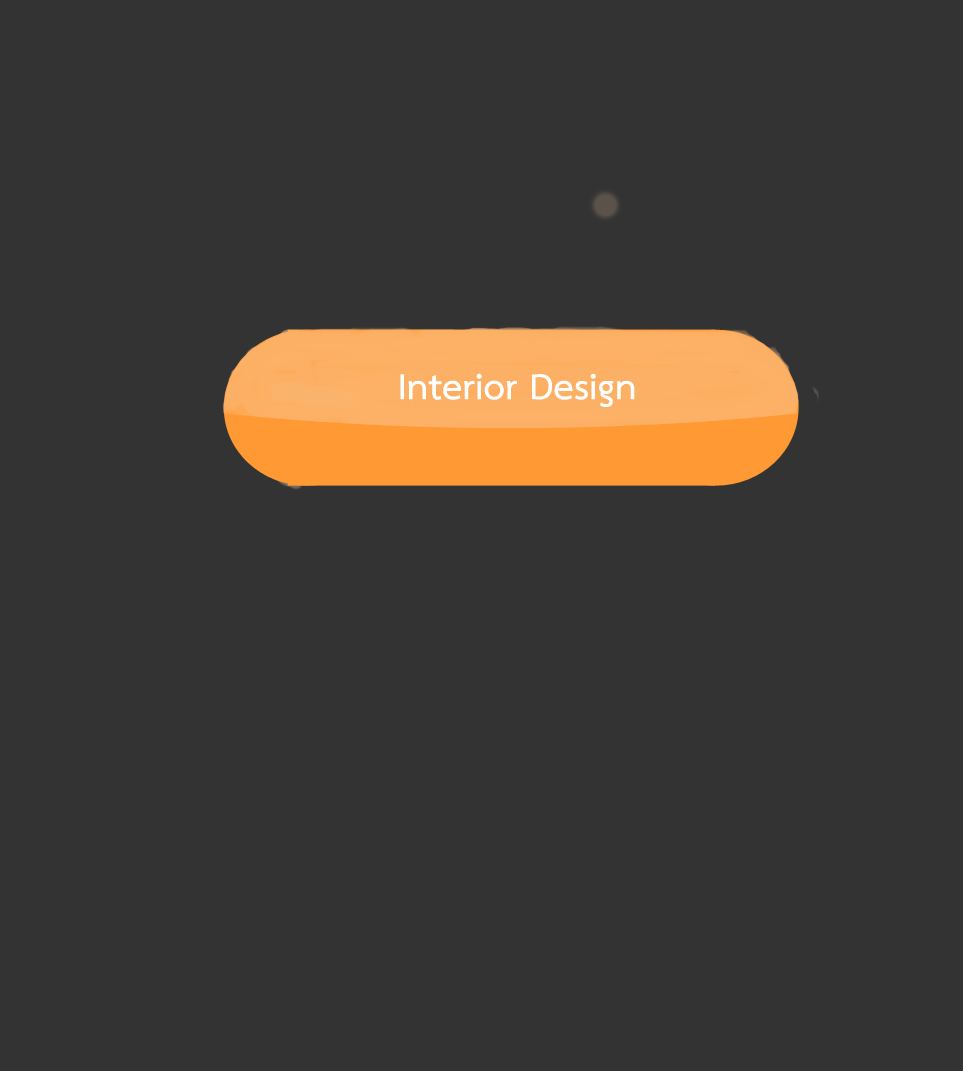
<style>
.page{position:relative;width:963px;height:1071px;background:#333333}
.page>*{position:absolute;margin:0}
.t1{font:52px "THSarabunPSK-Bold";color:#ffffff}
</style>
<div class="page">
<p class="t1" style="left:400px;top:373px;width:235px;height:34px">Interior Design</p>
</div>
